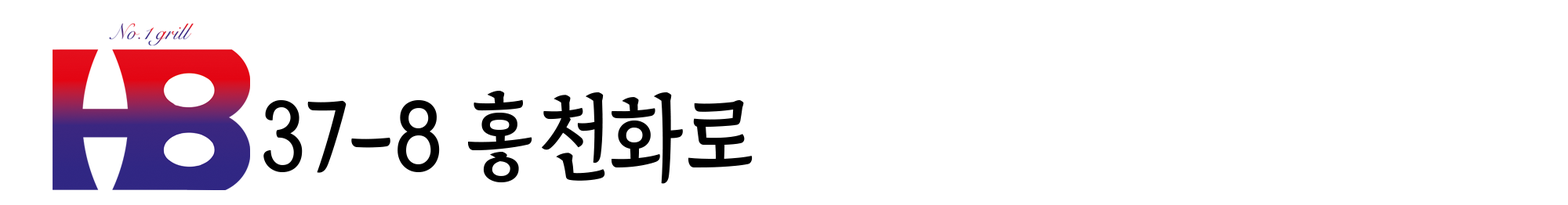
<style>
.page{position:relative;width:1568px;height:205px;background:#ffffff}
.page>*{position:absolute;margin:0}
.t1{font:93.7px "TheIndependenceHallofKorea-Regular";color:#000000;scale:0.89 1}
.t2{font:94.1px "TheIndependenceHallofKorea-Regular";color:#000000;scale:0.89 1}
</style>
<div class="page">
<p class="t1" style="left:263px;top:91px;width:490px;height:93px">37-8 <span class="t2">홍천화로</span></p>
</div>
